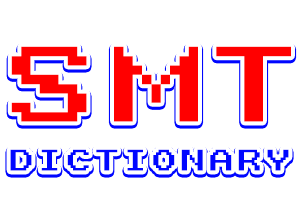
<style>
.page{position:relative;width:300px;height:200px;background:#ffffff}
.page>*{position:absolute;margin:0}
.t1{font:119.4px "WST_Germ";letter-spacing:0.075em;color:#ff0000}
.t2{font:33.3px "WST_Germ";letter-spacing:0.075em;color:#0006ff}
</style>
<div class="page">
<p class="t1" style="left:11px;top:46px;width:280px;height:76px">SMT</p>
<p class="t2" style="left:10px;top:149px;width:279px;height:22px">DICTIONARY</p>
</div>
